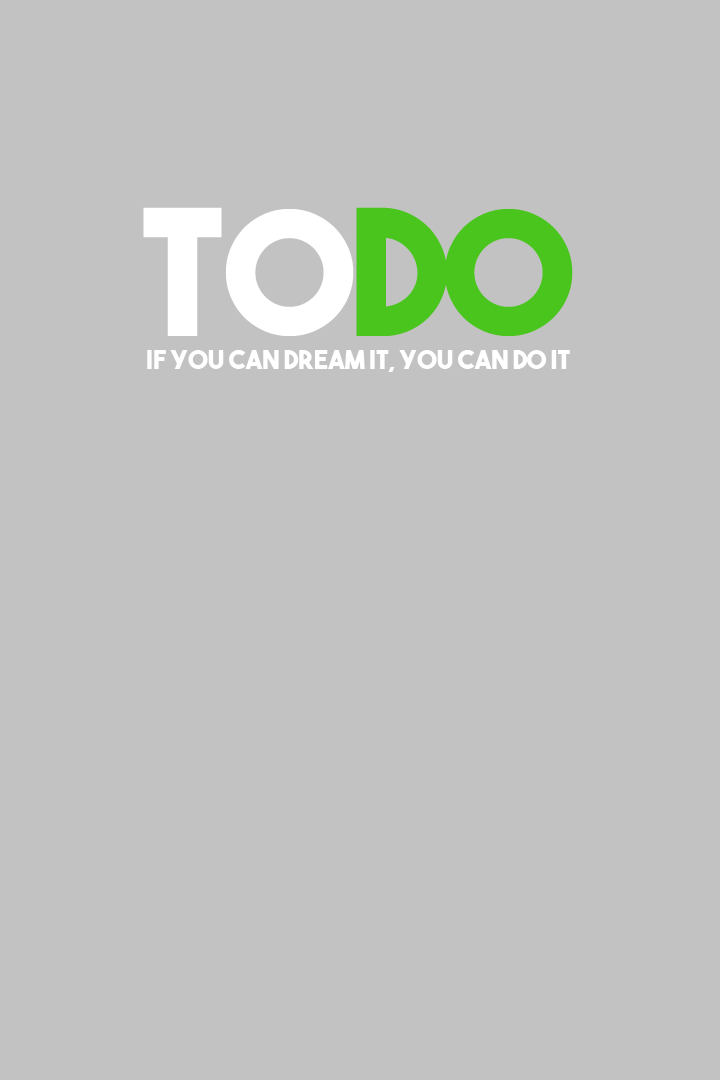
<style>
.page{position:relative;width:720px;height:1080px;background:#c2c2c2}
.page>*{position:absolute;margin:0}
.t1{font:172.5px "TheBoldFont";color:#ffffff}
.t2{font:172.5px "TheBoldFont";color:#49c51d}
.t3{font:25.9px "TheBoldFont";color:#ffffff}
</style>
<div class="page">
<p class="t1" style="left:143px;top:207px;width:430px;height:129px">To<span class="t2">DO</span></p>
<p class="t3" style="left:147px;top:350px;width:423px;height:22px">If you can dream it, you can do it</p>
</div>
